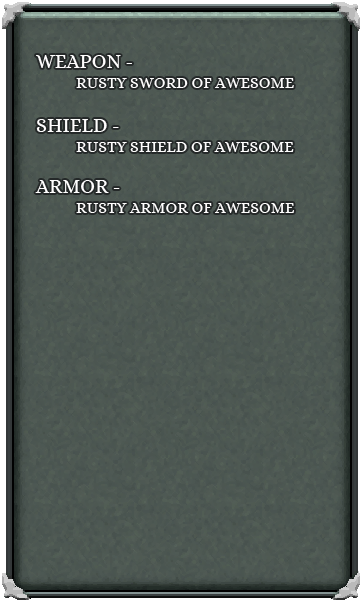
<style>
.page{position:relative;width:362px;height:602px}
.page>*{position:absolute;margin:0}
.t1{font:20px "Alice-Regular";color:#fffefe;text-transform:uppercase}
.t2{font:16px "Alice-Regular";color:#fffefe;text-transform:uppercase}
</style>
<div class="page">
<p class="t1" style="left:36px;top:55px;width:96px;height:13px">Weapon -</p>
<p class="t2" style="left:76px;top:78px;width:218px;height:10px">Rusty sword of awesome</p>
<p class="t1" style="left:36px;top:119px;width:83px;height:13px">Shield -</p>
<p class="t2" style="left:76px;top:142px;width:218px;height:10px">Rusty shield of awesome</p>
<p class="t1" style="left:35px;top:180px;width:85px;height:13px">Armor -</p>
<p class="t2" style="left:76px;top:203px;width:218px;height:10px">Rusty armor of awesome</p>
</div>
